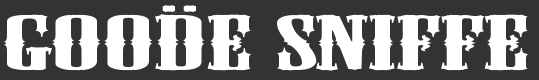
<style>
.page{position:relative;width:539px;height:80px;background:#333333}
.page>*{position:absolute;margin:0}
.t1{font:72px "MesquiteStd";color:#ffffff;scale:2.52 1}
</style>
<div class="page">
<p class="t1" style="left:4px;top:14px;width:524px;height:57px">GOODE Sniffe</p>
</div>
